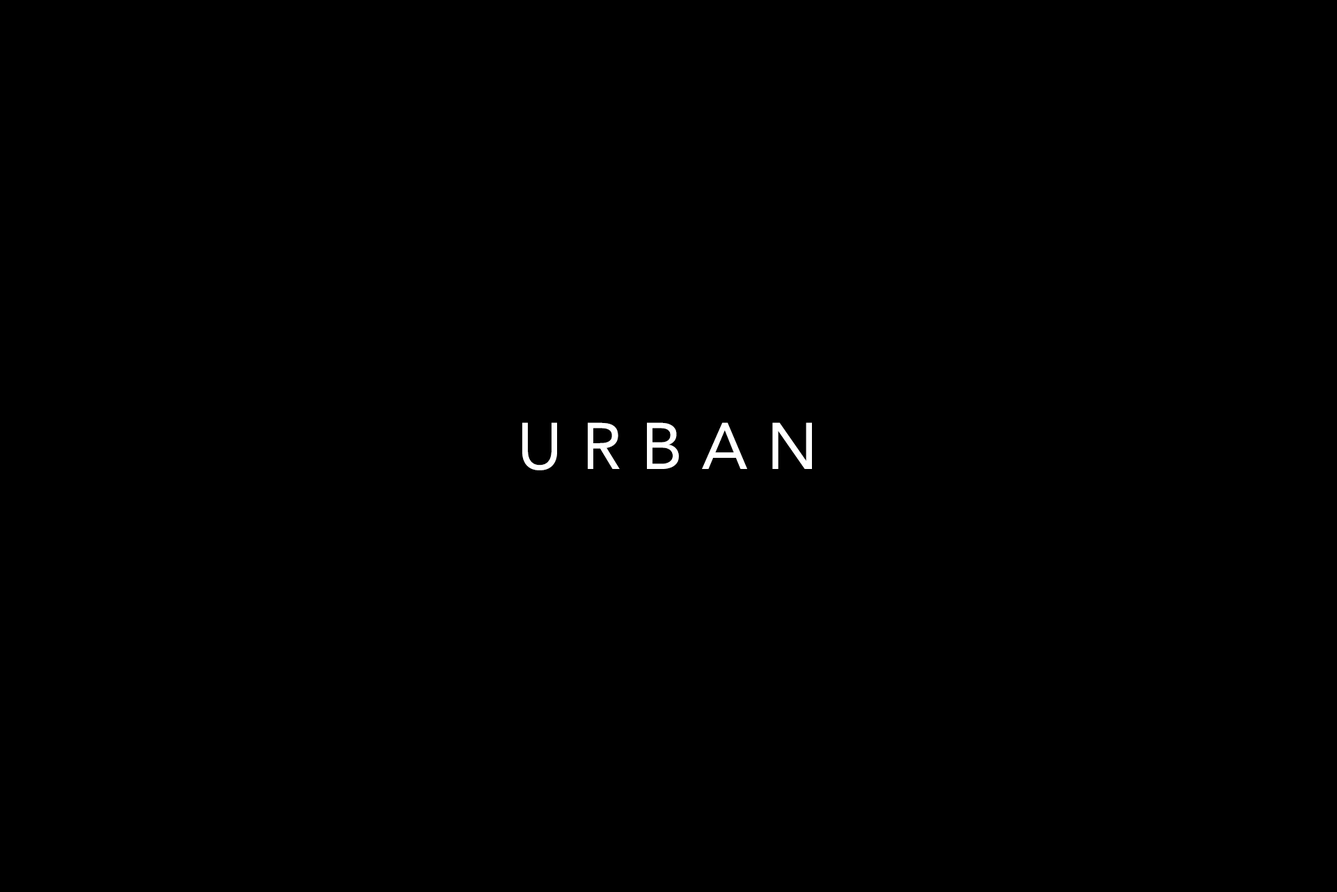
<style>
.page{position:relative;width:1337px;height:892px;background:#000000}
.page>*{position:absolute;margin:0}
.t1{font:65px "Avenir-Roman";letter-spacing:0.3em;color:#ffffff;text-transform:uppercase}
</style>
<div class="page">
<p class="t1" style="left:522px;top:422px;width:290px;height:48px">URBAN</p>
</div>
